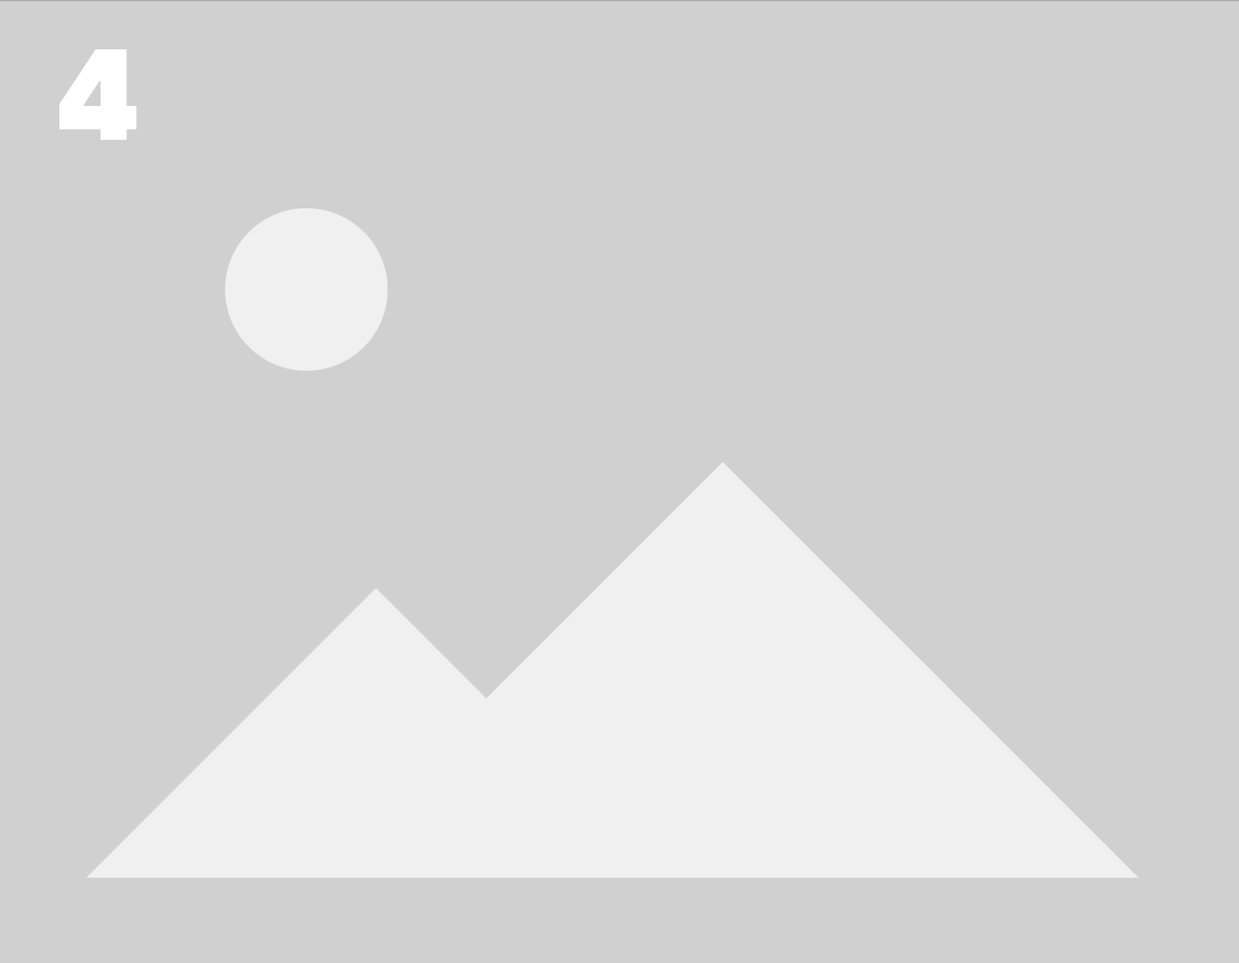
<style>
.page{position:relative;width:1239px;height:963px;background:#d0d0d0}
.page>*{position:absolute;margin:0}
.t1{font:129.7px "Alfarn2";color:#ffffff}
</style>
<div class="page">
<p class="t1" style="left:59px;top:49px;width:78px;height:92px">4</p>
</div>
